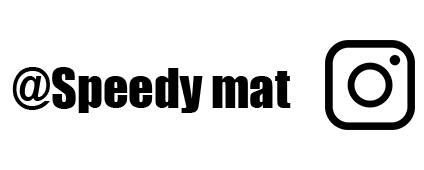
<style>
.page{position:relative;width:424px;height:170px;background:#ffffff}
.page>*{position:absolute;margin:0}
.t1{font:50px "Impact";color:#000000}
</style>
<div class="page">
<p class="t1" style="left:12px;top:67px;width:279px;height:46px">@Speedy mat</p>
</div>
